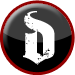
<style>
.page{position:relative;width:75px;height:75px;background:#ffffff}
.page>*{position:absolute;margin:0}
.t1{font:100px "Dirt2SoulStalker";color:#ffffff}
</style>
<div class="page">
<p class="t1" style="left:23px;top:11px;width:32px;height:54px">D</p>
</div>
